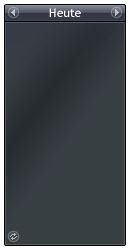
<style>
.page{position:relative;width:130px;height:250px;background:#383f43}
.page>*{position:absolute;margin:0}
.t1{font:12px "TrebuchetMS";color:#ffffff}
</style>
<div class="page">
<p class="t1" style="left:49px;top:8px;width:32px;height:9px">Heute</p>
</div>
